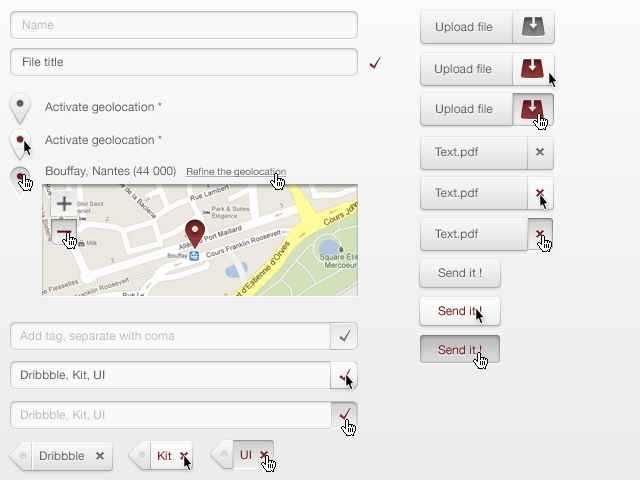
<style>
.page{position:relative;width:640px;height:480px}
.page>*{position:absolute;margin:0}
.t1{font:12px "HelveticaNeue";color:#bbbbbb}
.t2{font:12px "HelveticaNeue";color:#666666}
.t3{font:10px "HelveticaNeue";color:#666666;text-decoration:underline}
.t4{font:12px "HelveticaNeue";color:#7c2021}
</style>
<div class="page">
<p class="t1" style="left:23px;top:20px;width:31px;height:10px">Name</p>
<p class="t2" style="left:436px;top:22px;width:57px;height:12px">Upload file</p>
<p class="t2" style="left:23px;top:57px;width:40px;height:10px">File title</p>
<p class="t2" style="left:435px;top:64px;width:57px;height:12px">Upload file</p>
<p class="t2" style="left:45px;top:102px;width:117px;height:12px">Activate geolocation *</p>
<p class="t2" style="left:436px;top:104px;width:57px;height:12px">Upload file</p>
<p class="t2" style="left:45px;top:135px;width:117px;height:12px">Activate geolocation *</p>
<p class="t2" style="left:435px;top:147px;width:44px;height:12px">Text.pdf</p>
<p class="t2" style="left:46px;top:166px;width:241px;height:12px">Bouffay, Nantes (44 000)   <span class="t3">Refine the geolocation</span></p>
<p class="t2" style="left:435px;top:188px;width:44px;height:12px">Text.pdf</p>
<p class="t2" style="left:435px;top:229px;width:44px;height:12px">Text.pdf</p>
<p class="t2" style="left:438px;top:268px;width:44px;height:10px">Send it !</p>
<p class="t4" style="left:438px;top:306px;width:44px;height:10px">Send it !</p>
<p class="t1" style="left:20px;top:331px;width:155px;height:12px">Add tag, separate with coma</p>
<p class="t4" style="left:438px;top:345px;width:44px;height:10px">Send it !</p>
<p class="t2" style="left:21px;top:370px;width:84px;height:11px">Dribbble, Kit, UI</p>
<p class="t1" style="left:21px;top:410px;width:84px;height:11px">Dribbble, Kit, UI</p>
<p class="t2" style="left:40px;top:451px;width:44px;height:10px">Dribbble</p>
<p class="t4" style="left:158px;top:451px;width:14px;height:9px">Kit</p>
<p class="t4" style="left:240px;top:450px;width:11px;height:10px">UI</p>
</div>
